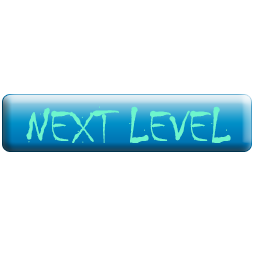
<style>
.page{position:relative;width:256px;height:256px;background:#ffffff}
.page>*{position:absolute;margin:0}
.t1{font:50px "Chiller-Regular";color:#6ef5cd}
</style>
<div class="page">
<p class="t1" style="left:26px;top:106px;width:205px;height:37px">NEXT LEVEL</p>
</div>
